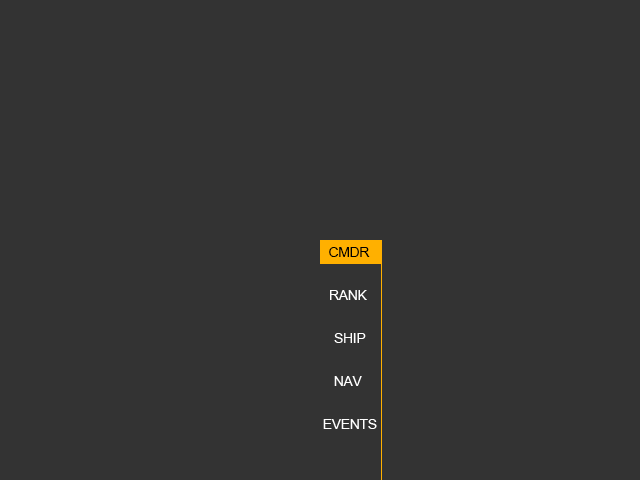
<style>
.page{position:relative;width:640px;height:480px;background:#333333}
.page>*{position:absolute;margin:0}
.t1{font:13.5px "ArialUnicodeMS";color:#000000}
.t2{font:13.5px "ArialUnicodeMS";color:#ffffff}
</style>
<div class="page">
<p class="t1" style="left:329px;top:247px;width:41px;height:10px">CMDR</p>
<p class="t2" style="left:330px;top:290px;width:37px;height:10px">RANK</p>
<p class="t2" style="left:334px;top:333px;width:32px;height:10px">SHIP</p>
<p class="t2" style="left:334px;top:376px;width:28px;height:10px">NAV</p>
<p class="t2" style="left:323px;top:419px;width:54px;height:10px">EVENTS</p>
</div>
